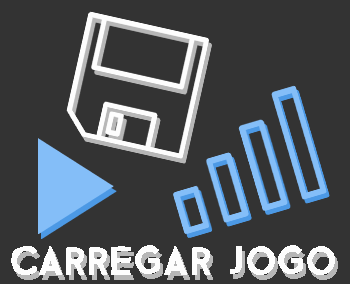
<style>
.page{position:relative;width:350px;height:284px;background:#333333}
.page>*{position:absolute;margin:0}
.t1{font:40.7px "Bizon";color:#fdfdfd;font-weight:bold;scale:0.97 1}
</style>
<div class="page">
<p class="t1" style="left:11px;top:245px;width:324px;height:30px">CARREGAR JOGO</p>
</div>
